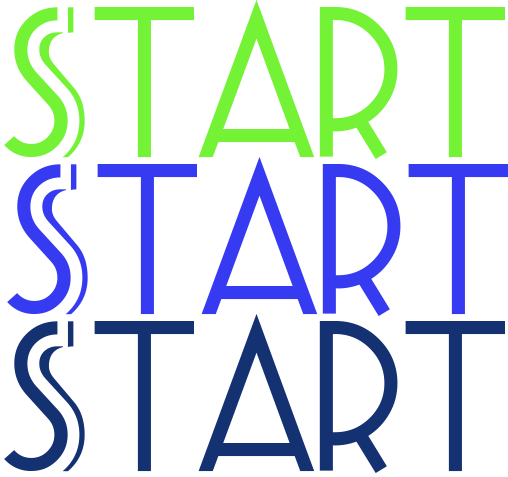
<style>
.page{position:relative;width:508px;height:477px;background:#ffffff}
.page>*{position:absolute;margin:0}
.t1{font:173.6px "PosteRetro";color:#74f236}
.t2{font:173.6px "PosteRetro";color:#363bf2}
.t3{font:173.6px "PosteRetro";color:#153172}
</style>
<div class="page">
<p class="t1" style="left:4px;top:0px;width:501px;height:159px">Start</p>
<p class="t2" style="left:7px;top:157px;width:501px;height:159px">Start</p>
<p class="t3" style="left:4px;top:314px;width:501px;height:159px">Start</p>
</div>
